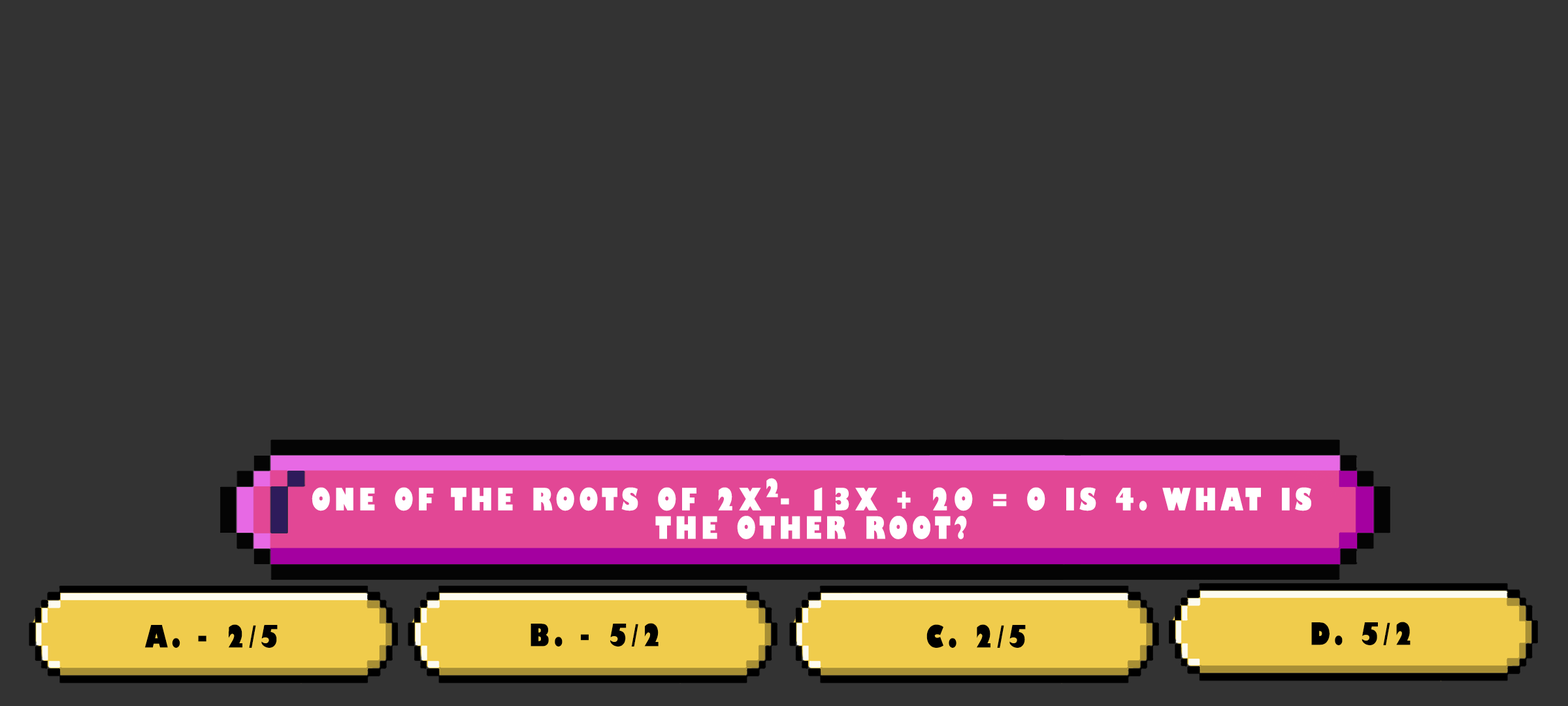
<style>
.page{position:relative;width:1568px;height:706px;background:#333333}
.page>*{position:absolute;margin:0}
.t1{font:24.5px "GillSans-UltraBoldCondensed";letter-spacing:0.115em;color:#ffffff;text-transform:uppercase;scale:1.12 1}
.t2{font:30px/28.4px "GillSans-UltraBoldCondensed";letter-spacing:0.115em;color:#ffffff;text-transform:uppercase;scale:1.12 1}
.t3{font:29.9px "GillSans-UltraBoldCondensed";letter-spacing:0.115em;color:#000000;text-transform:uppercase;scale:1.12 1}
</style>
<div class="page">
<p class="t1" style="left:766px;top:478px;width:12px;height:19px">2</p>
<p class="t2" style="left:312px;top:487px;width:999px;height:52px;text-align:center">One of the roots of 2x - 13x + 20 = 0 is 4. What is the other root?</p>
<p class="t3" style="left:145px;top:624px;width:133px;height:23px">a. - 2/5</p>
<p class="t3" style="left:531px;top:623px;width:128px;height:23px">b. - 5/2</p>
<p class="t3" style="left:926px;top:624px;width:100px;height:23px">c. 2/5</p>
<p class="t3" style="left:1311px;top:621px;width:100px;height:24px">d. 5/2</p>
</div>
